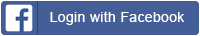
<style>
.page{position:relative;width:200px;height:36px;background:#445f97}
.page>*{position:absolute;margin:0}
.t1{font:14px "ArialMT";letter-spacing:0.025em;color:#ffffff}
</style>
<div class="page">
<p class="t1" style="left:50px;top:11px;width:135px;height:14px">Login with Facebook</p>
</div>
